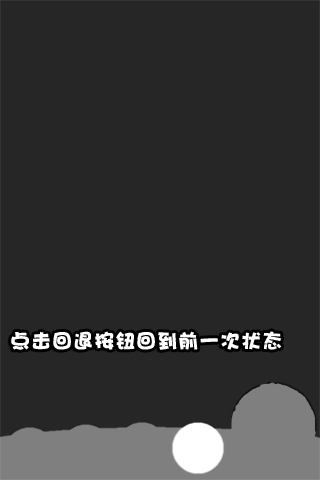
<style>
.page{position:relative;width:320px;height:480px;background:#262626}
.page>*{position:absolute;margin:0}
.t1{font:20px "DFPHaiBaoW12";letter-spacing:0.05em;color:#ffffff}
</style>
<div class="page">
<p class="t1" style="left:11px;top:331px;width:271px;height:19px">点击回退按钮回到前一次状态</p>
</div>
